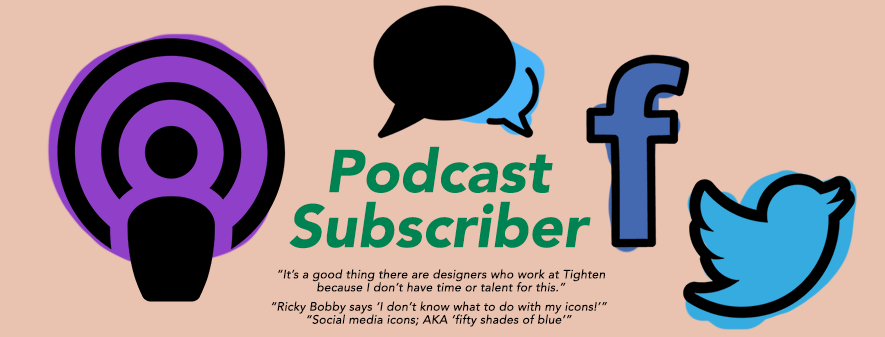
<style>
.page{position:relative;width:885px;height:337px;background:#eac3b0}
.page>*{position:absolute;margin:0}
.t1{font:59.8px/54.8px "Avenir-BlackOblique";color:#008353}
.t2{font:12px/13px "Avenir-Oblique";letter-spacing:0.02em;color:#000000}
</style>
<div class="page">
<p class="t1" style="left:289px;top:146px;width:302px;height:103px;text-align:center">Podcast<br>Subscriber</p>
<p class="t2" style="left:278px;top:269px;width:327px;height:23px;text-align:center">“It’s a good thing there are designers who work at Tighten<br>because I don’t have time or talent for this.”</p>
<p class="t2" style="left:271px;top:301px;width:336px;height:26px;text-align:center">“Ricky Bobby says ‘I don’t know what to do with my icons!’”<br>“Social media icons; AKA ‘fifty shades of blue’”</p>
</div>
